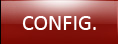
<style>
.page{position:relative;width:118px;height:44px}
.page>*{position:absolute;margin:0}
.t1{font:22px "Calibri";color:#ffffff}
</style>
<div class="page">
<p class="t1" style="left:22px;top:16px;width:74px;height:14px">CONFIG.</p>
</div>
